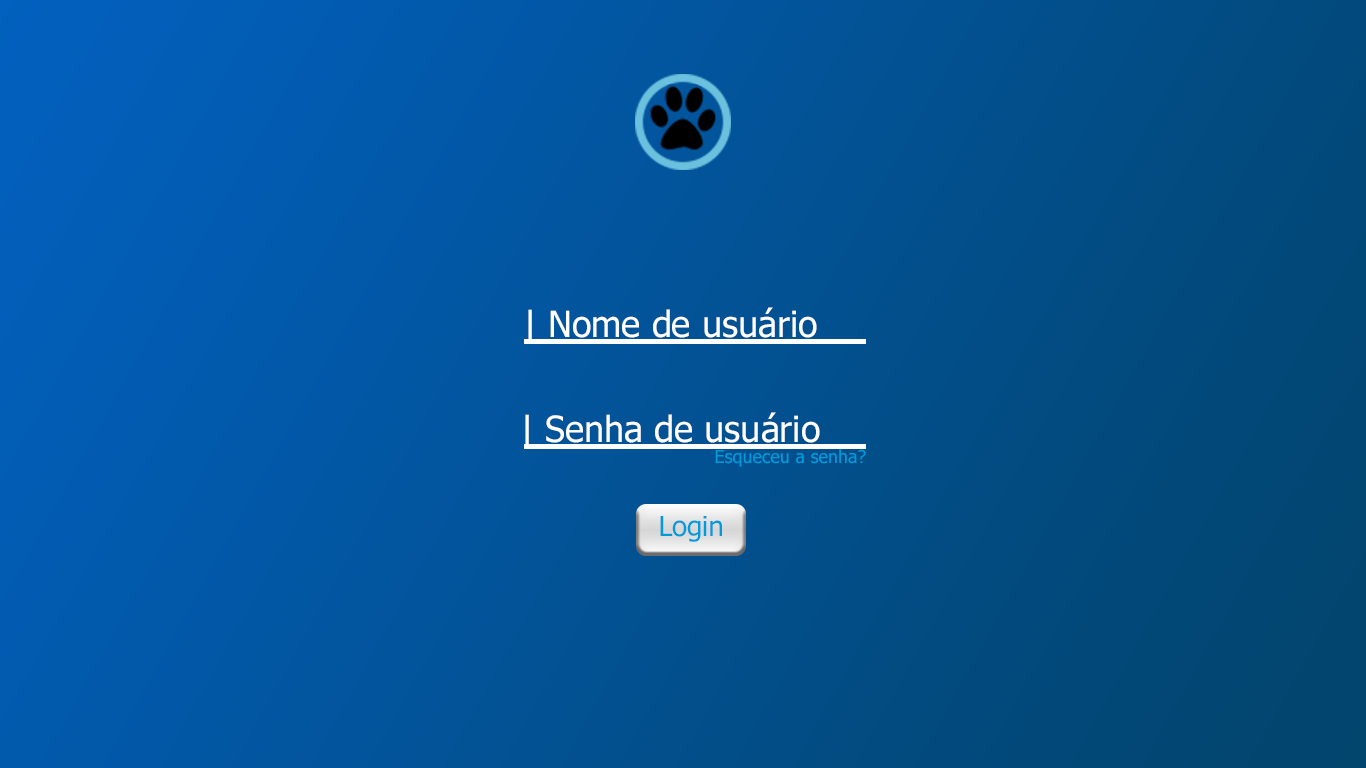
<style>
.page{position:relative;width:1366px;height:768px}
.page>*{position:absolute;margin:0}
.t1{font:36px "Tahoma";color:#ffffff}
.t2{font:18px "Tahoma";color:#009bdb}
.t3{font:27.5px "Tahoma";color:#009bdb}
</style>
<div class="page">
<p class="t1" style="left:528px;top:307px;width:289px;height:37px">| Nome de usuário</p>
<p class="t1" style="left:525px;top:412px;width:295px;height:37px">| Senha de usuário</p>
<p class="t2" style="left:715px;top:449px;width:151px;height:18px">Esqueceu a senha?</p>
<p class="t3" style="left:660px;top:516px;width:62px;height:26px">Login</p>
</div>
